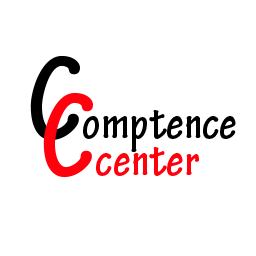
<style>
.page{position:relative;width:256px;height:256px;background:#ffffff}
.page>*{position:absolute;margin:0}
.t1{font:48px "TektonPro-BoldCond";color:#000000}
.t2{font:125px "TektonPro-BoldCond";color:#000000}
.t3{font:48px "TektonPro-BoldCond";color:#ff000c}
.t4{font:125px "TektonPro-BoldCond";color:#ff000c}
</style>
<div class="page">
<p class="t1" style="left:30px;top:55px;width:206px;height:97px"><span class="t2">C</span>omptence</p>
<p class="t3" style="left:43px;top:92px;width:156px;height:86px"><span class="t4">C</span>center</p>
</div>
